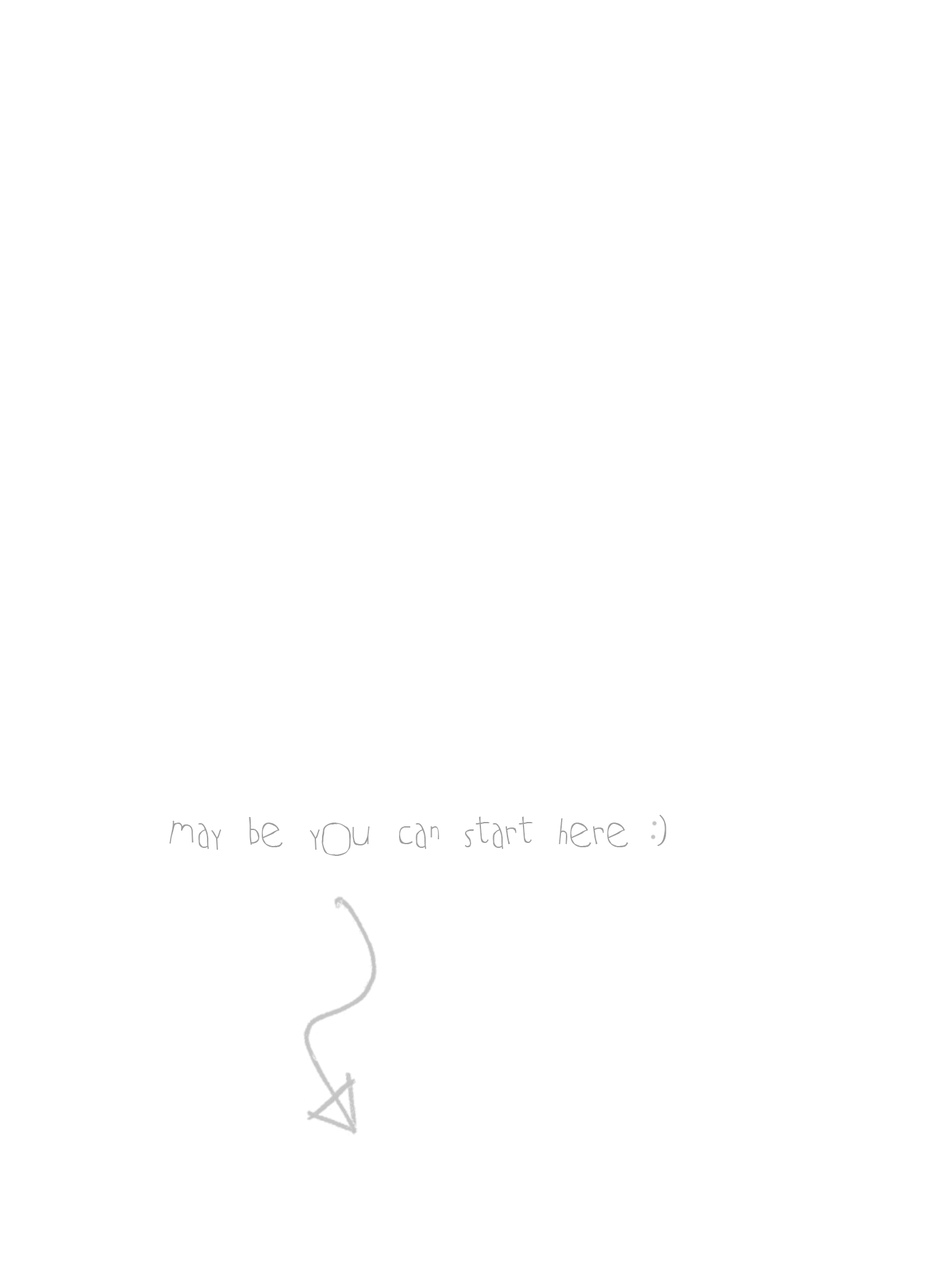
<style>
.page{position:relative;width:946px;height:1261px;background:#ffffff}
.page>*{position:absolute;margin:0}
.t1{font:48.8px "Two-TurtleDoves";color:#9b9b9b}
</style>
<div class="page">
<p class="t1" style="left:169px;top:815px;width:497px;height:41px">may be you can start here )</p>
</div>
